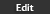
<style>
.page{position:relative;width:50px;height:14px;background:#333333}
.page>*{position:absolute;margin:0}
.t1{font:10px "AmiraParadiso";color:#fefefe}
</style>
<div class="page">
<p class="t1" style="left:16px;top:4px;width:18px;height:7px">Edit</p>
</div>
